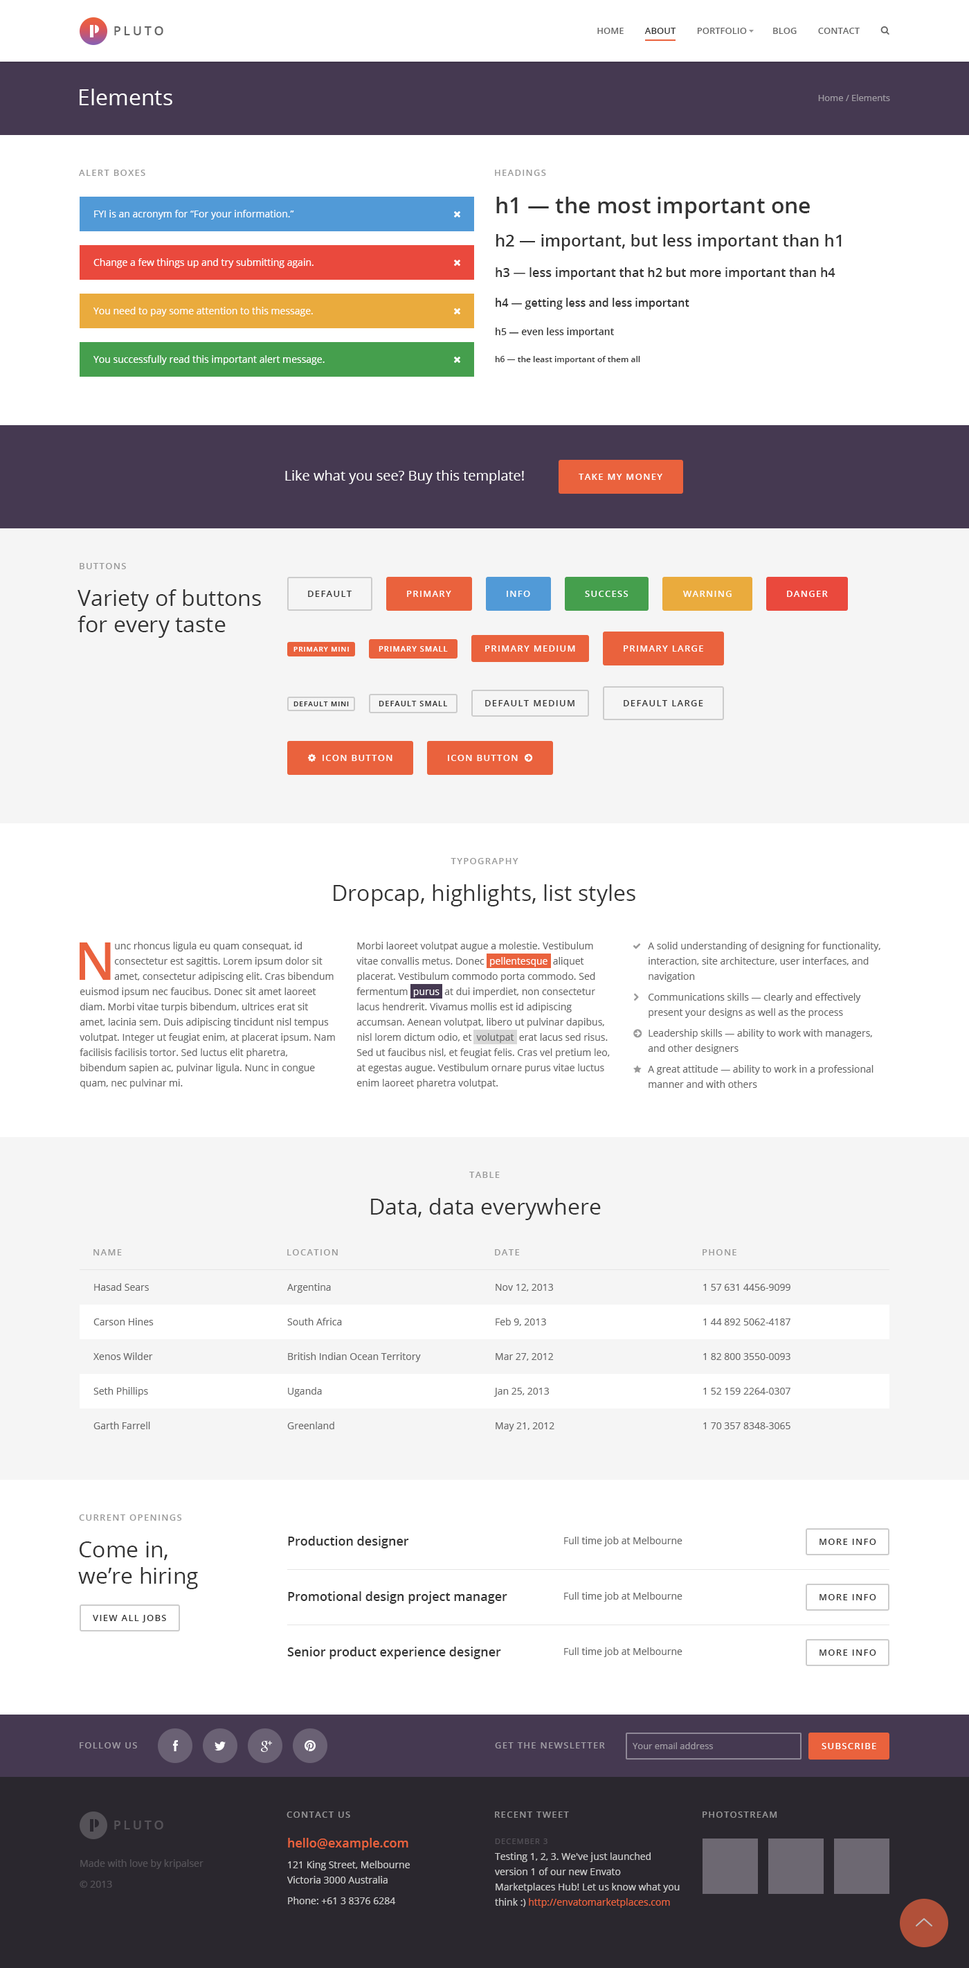
<style>
.page{position:relative;width:969px;height:1968px;background:#ffffff}
.page>*{position:absolute;margin:0}
.t1{font:12.5px "OpenSans-Semibold";letter-spacing:0.2em;color:#666666;text-transform:uppercase}
.t2{font:9px "OpenSans-Semibold";color:#666666;text-transform:uppercase}
.t3{font:9px "OpenSans-Semibold";color:#333333;text-transform:uppercase}
.t4{font:22.2px "OpenSans";color:#ffffff}
.t5{font:9px "OpenSans";color:#a09ca4}
.t6{font:9px "OpenSans-Semibold";letter-spacing:0.1em;color:#999999;text-transform:uppercase}
.t7{font:22.2px "OpenSans-Semibold";color:#333333}
.t8{font:9.7px "OpenSans";color:#ffffff}
.t9{font:16.6px "OpenSans-Semibold";color:#333333}
.t10{font:12.5px "OpenSans-Semibold";color:#333333}
.t11{font:11.1px "OpenSans-Semibold";color:#333333}
.t12{font:9.7px "OpenSans-Semibold";color:#333333}
.t13{font:8.3px "OpenSans-Semibold";color:#333333}
.t14{font:13.8px "OpenSans";color:#ffffff}
.t15{font:9px "OpenSans-Semibold";letter-spacing:0.1em;color:#ffffff;text-transform:uppercase}
.t16{font:22.2px "OpenSans";color:#333333}
.t17{font:9px "OpenSans-Semibold";letter-spacing:0.1em;color:#333333;text-transform:uppercase}
.t18{font:6.9px "OpenSans-Semibold";letter-spacing:0.1em;color:#ffffff;text-transform:uppercase}
.t19{font:7.6px "OpenSans-Semibold";letter-spacing:0.1em;color:#ffffff;text-transform:uppercase}
.t20{font:6.9px "OpenSans-Semibold";letter-spacing:0.1em;color:#333333;text-transform:uppercase}
.t21{font:7.6px "OpenSans-Semibold";letter-spacing:0.1em;color:#333333;text-transform:uppercase}
.t22{font:9.7px/15.2px "OpenSans";color:#666666}
.t23{font:9.7px/15.2px "OpenSans";color:#ffffff}
.t24{font:9.7px/20.8px "OpenSans";color:#666666}
.t25{font:51.9px "OpenSans-Semibold";color:#ea623d}
.t26{font:9.7px/34.6px "OpenSans";color:#666666}
.t27{font:9.7px "OpenSans";color:#666666}
.t28{font:9px "OpenSans-Semibold";letter-spacing:0.1em;color:#a09ca4;text-transform:uppercase}
.t29{font:9px "OpenSans-Semibold";letter-spacing:0.1em;color:#979698;text-transform:uppercase}
.t30{font:12.5px "OpenSans-Semibold";letter-spacing:0.2em;color:#555258;text-transform:uppercase}
.t31{font:9.7px/20.8px "OpenSans";color:#cccccc}
.t32{font:12.5px/16.6px "OpenSans-Semibold";color:#ea623d}
.t33{font:9.7px/15.2px "OpenSans";color:#cccccc}
.t34{font:7.6px "OpenSans";letter-spacing:0.1em;color:#545158;text-transform:uppercase}
.t35{font:9.7px/15.9px "OpenSans";color:#cccccc}
.t36{font:9.7px/15.2px "OpenSans";color:#ea623d}
.t37{font:9.7px/20.8px "OpenSans";color:#555258}
</style>
<div class="page">
<p class="t1" style="left:114px;top:26px;width:49px;height:9px">Pluto</p>
<p class="t2" style="left:597px;top:28px;width:263px;height:6px">Home         <span class="t3">About         </span>Portfolio           Blog         Contact</p>
<p class="t4" style="left:80px;top:89px;width:92px;height:16px">Elements</p>
<p class="t5" style="left:818px;top:94px;width:72px;height:7px">Home / Elements</p>
<p class="t6" style="left:79px;top:170px;width:66px;height:6px">Alert boxes</p>
<p class="t6" style="left:495px;top:170px;width:51px;height:6px">Headings</p>
<p class="t7" style="left:496px;top:197px;width:314px;height:22px">h1 — the most important one</p>
<p class="t8" style="left:94px;top:210px;width:200px;height:9px">FYI is an acronym for “For your information.”</p>
<p class="t9" style="left:496px;top:234px;width:346px;height:17px">h2 — important, but less important than h1</p>
<p class="t8" style="left:93px;top:258px;width:221px;height:10px">Change a few things up and try submitting again.</p>
<p class="t10" style="left:496px;top:267px;width:340px;height:13px">h3 — less important that h2 but more important than h4</p>
<p class="t11" style="left:496px;top:298px;width:194px;height:11px">h4 — getting less and less important</p>
<p class="t8" style="left:93px;top:307px;width:220px;height:9px">You need to pay some attention to this message.</p>
<p class="t12" style="left:496px;top:327px;width:118px;height:10px">h5 — even less important</p>
<p class="t8" style="left:93px;top:355px;width:232px;height:10px">You successfully read this important alert message.</p>
<p class="t13" style="left:495px;top:356px;width:145px;height:8px">h6 — the least important of them all</p>
<p class="t14" style="left:285px;top:470px;width:239px;height:14px">Like what you see? Buy this template!</p>
<p class="t15" style="left:579px;top:474px;width:84px;height:6px">Take my money</p>
<p class="t6" style="left:80px;top:563px;width:46px;height:6px">Buttons</p>
<p class="t16" style="left:78px;top:589px;width:183px;height:49px">Variety of buttons<br>for every taste</p>
<p class="t17" style="left:308px;top:591px;width:44px;height:6px">Default</p>
<p class="t15" style="left:407px;top:591px;width:44px;height:6px">Primary</p>
<p class="t15" style="left:507px;top:591px;width:23px;height:6px">Info</p>
<p class="t15" style="left:585px;top:591px;width:44px;height:6px">Success</p>
<p class="t15" style="left:683px;top:591px;width:49px;height:6px">Warning</p>
<p class="t15" style="left:787px;top:591px;width:41px;height:6px">Danger</p>
<p class="t18" style="left:294px;top:647px;width:55px;height:4px">Primary Mini</p>
<p class="t19" style="left:379px;top:646px;width:69px;height:5px">Primary Small</p>
<p class="t15" style="left:485px;top:645px;width:90px;height:6px">Primary Medium</p>
<p class="t15" style="left:624px;top:645px;width:79px;height:6px">Primary Large</p>
<p class="t20" style="left:294px;top:701px;width:55px;height:5px">Default Mini</p>
<p class="t21" style="left:379px;top:701px;width:68px;height:5px">Default Small</p>
<p class="t17" style="left:485px;top:700px;width:90px;height:6px">Default Medium</p>
<p class="t17" style="left:624px;top:700px;width:79px;height:6px">Default Large</p>
<p class="t15" style="left:323px;top:755px;width:70px;height:6px">Icon Button</p>
<p class="t15" style="left:448px;top:755px;width:70px;height:6px">Icon Button</p>
<p class="t6" style="left:451px;top:858px;width:68px;height:6px">Typography</p>
<p class="t16" style="left:334px;top:884px;width:302px;height:22px">Dropcap, highlights, list styles</p>
<p class="t22" style="left:80px;top:942px;width:255px;height:146px">unc rhoncus ligula eu quam consequat, id consectetur est sagittis. Lorem ipsum dolor sit amet, consectetur adipiscing elit. Cras bibendum<br>euismod ipsum nec faucibus. Donec sit amet laoreet diam. Morbi vitae turpis bibendum, ultrices erat sit amet, lacinia sem. Duis adipiscing tincidunt nisl tempus volutpat. Integer ut feugiat enim, at placerat ipsum. Nam facilisis facilisis tortor. Sed luctus elit pharetra, bibendum sapien ac, pulvinar ligula. Nunc in congue quam, nec pulvinar mi.</p>
<p class="t22" style="left:357px;top:942px;width:253px;height:146px">Morbi laoreet volutpat augue a molestie. Vestibulum vitae convallis metus. Donec  <span class="t23">pellentesque  </span>aliquet placerat. Vestibulum commodo porta commodo. Sed fermentum  <span class="t23">purus  </span>at dui imperdiet, non consectetur lacus hendrerit. Vivamus mollis est id adipiscing accumsan. Aenean volutpat, libero ut pulvinar dapibus, nisl lorem dictum odio, et  volutpat  erat lacus sed risus. Sed ut faucibus nisl, et feugiat felis. Cras vel pretium leo, at egestas augue. Vestibulum ornare purus vitae luctus enim laoreet pharetra volutpat.</p>
<p class="t22" style="left:648px;top:942px;width:233px;height:146px"><span class="t24">A solid understanding of designing for functionality, <br></span>interaction, site architecture, user interfaces, and navigation<br><span class="t24">Communications skills — clearly and effectively <br></span>present your designs as well as the process <br><span class="t24">Leadership skills — ability to work with managers, <br></span>and other designers<br><span class="t24">A great attitude — ability to work in a professional <br></span>manner and with others</p>
<p class="t25" style="left:80px;top:942px;width:31px;height:38px">N</p>
<p class="t6" style="left:469px;top:1171px;width:31px;height:7px">Table</p>
<p class="t16" style="left:371px;top:1198px;width:230px;height:22px">Data, data everywhere</p>
<p class="t6" style="left:93px;top:1249px;width:29px;height:6px">Name</p>
<p class="t6" style="left:287px;top:1249px;width:51px;height:6px">Location</p>
<p class="t6" style="left:495px;top:1249px;width:25px;height:6px">Date</p>
<p class="t6" style="left:703px;top:1249px;width:34px;height:6px">Phone</p>
<p class="t26" style="left:93px;top:1283px;width:61px;height:146px">Hasad Sears<br>Carson Hines<br>Xenos Wilder<br>Seth Phillips<br>Garth Farrell</p>
<p class="t26" style="left:287px;top:1283px;width:134px;height:146px">Argentina<br>South Africa<br>British Indian Ocean Territory<br>Uganda<br>Greenland</p>
<p class="t26" style="left:494px;top:1284px;width:61px;height:147px">Nov 12, 2013<br>Feb 9, 2013<br>Mar 27, 2012<br>Jan 25, 2013<br>May 21, 2012</p>
<p class="t26" style="left:703px;top:1284px;width:88px;height:145px">1 57 631 4456-9099<br>1 44 892 5062-4187<br>1 82 800 3550-0093<br>1 52 159 2264-0307<br>1 70 357 8348-3065</p>
<p class="t6" style="left:79px;top:1514px;width:103px;height:6px">Current openings</p>
<p class="t16" style="left:78px;top:1541px;width:120px;height:48px">Come in,<br>we’re hiring</p>
<p class="t10" style="left:288px;top:1536px;width:121px;height:12px">Production designer</p>
<p class="t27" style="left:564px;top:1536px;width:119px;height:10px">Full time job at Melbourne</p>
<p class="t17" style="left:820px;top:1538px;width:56px;height:7px">More info</p>
<p class="t10" style="left:288px;top:1591px;width:219px;height:12px">Promotional design project manager</p>
<p class="t27" style="left:564px;top:1592px;width:119px;height:9px">Full time job at Melbourne</p>
<p class="t17" style="left:820px;top:1594px;width:56px;height:6px">More info</p>
<p class="t17" style="left:93px;top:1614px;width:73px;height:8px">View all jobs</p>
<p class="t10" style="left:287px;top:1646px;width:214px;height:13px">Senior product experience designer</p>
<p class="t27" style="left:564px;top:1647px;width:119px;height:10px">Full time job at Melbourne</p>
<p class="t17" style="left:820px;top:1649px;width:56px;height:6px">More info</p>
<p class="t28" style="left:80px;top:1742px;width:57px;height:6px">Follow us</p>
<p class="t28" style="left:495px;top:1742px;width:110px;height:6px">Get the newsletter</p>
<p class="t5" style="left:633px;top:1742px;width:80px;height:7px">Your email address</p>
<p class="t15" style="left:822px;top:1743px;width:54px;height:6px">Subscribe</p>
<p class="t29" style="left:287px;top:1811px;width:63px;height:6px">Contact us</p>
<p class="t29" style="left:495px;top:1811px;width:74px;height:6px">Recent tweet</p>
<p class="t29" style="left:703px;top:1811px;width:74px;height:6px">Photostream</p>
<p class="t30" style="left:114px;top:1820px;width:49px;height:9px">Pluto</p>
<p class="t31" style="left:287px;top:1837px;width:123px;height:67px"><span class="t32">hello@example.com<br></span>121 King Street, Melbourne <br><span class="t33">Victoria 3000 Australia<br></span>Phone: +61 3 8376 6284</p>
<p class="t34" style="left:495px;top:1838px;width:53px;height:6px">December 3</p>
<p class="t33" style="left:495px;top:1852px;width:185px;height:55px"><span class="t35">Testing 1, 2, 3. We've just launched </span>version 1 of our new Envato Marketplaces Hub! Let us know what you think :) <span class="t36">http://envatomarketplaces.com</span></p>
<p class="t37" style="left:80px;top:1859px;width:124px;height:28px">Made with love by kripalser<br>© 2013</p>
</div>
